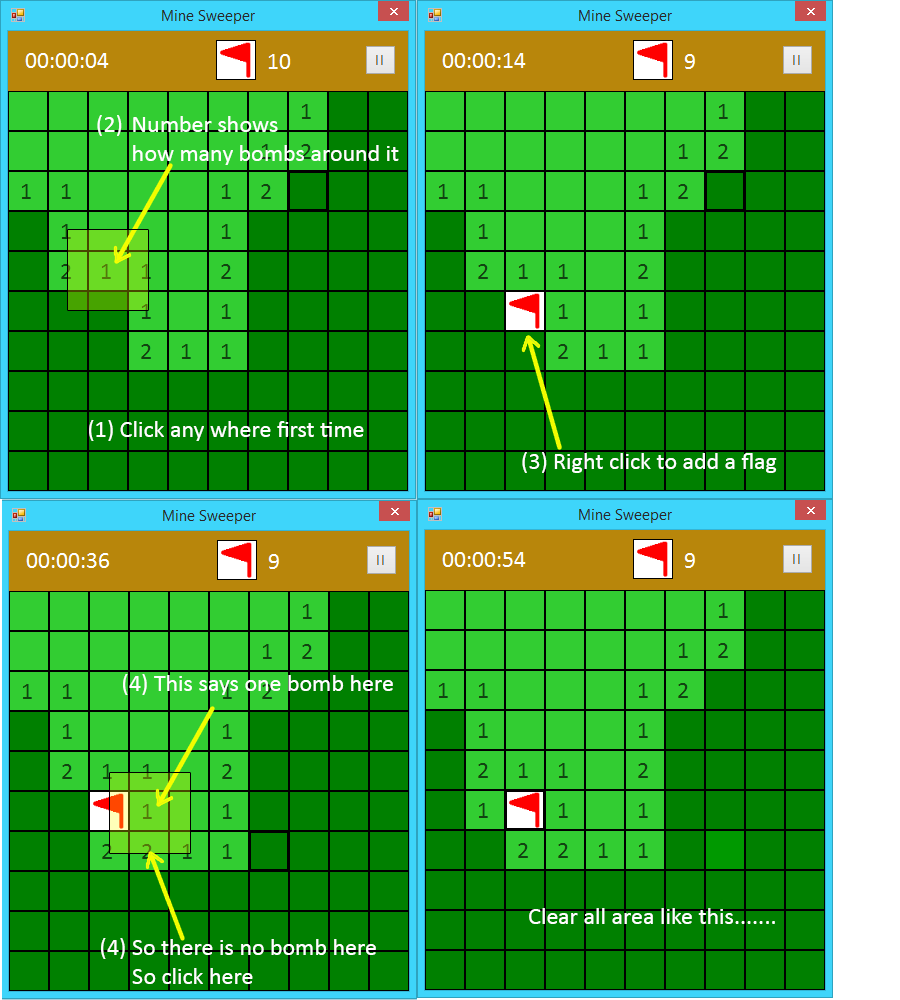
<style>
.page{position:relative;width:900px;height:1000px;background:#008000}
.page>*{position:absolute;margin:0}
.t1{font:24px "Calibri";color:#fffefe}
.t2{font:24px "Calibri";color:#fefefe}
</style>
<div class="page">
<p class="t1" style="left:97px;top:115px;width:25px;height:21px">(2)</p>
<p class="t1" style="left:133px;top:116px;width:266px;height:49px">Number shows<br>how many bombs around it</p>
<p class="t1" style="left:89px;top:420px;width:275px;height:21px">(1) Click any where first time</p>
<p class="t2" style="left:522px;top:452px;width:255px;height:21px">(3) Right click to add a flag</p>
<p class="t1" style="left:123px;top:674px;width:270px;height:21px">(4) This says one bomb here</p>
<p class="t1" style="left:529px;top:908px;width:246px;height:16px">Clear all area like this.......</p>
<p class="t1" style="left:101px;top:938px;width:275px;height:46px">(4) So there is no bomb here<br>      So click here</p>
</div>
